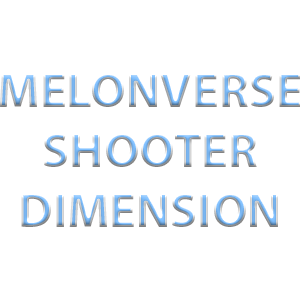
<style>
.page{position:relative;width:300px;height:300px;background:#ffffff}
.page>*{position:absolute;margin:0}
.t1{font:50px "MyriadPro-Bold"}
</style>
<div class="page">
<p class="t1" style="left:0px;top:73px;width:301px;height:154px;text-align:center">MELONVERSE<br>SHOOTER<br>DIMENSION</p>
</div>
